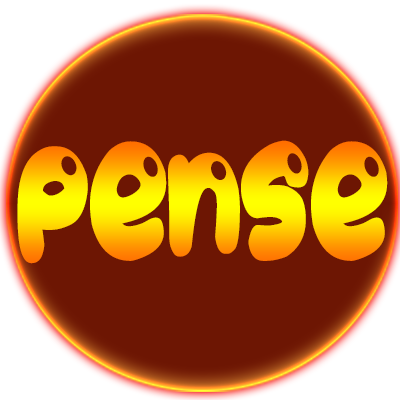
<style>
.page{position:relative;width:400px;height:400px;background:#6d1603}
.page>*{position:absolute;margin:0}
.t1{font:125.4px "JuicyFruity";scale:0.66 1}
</style>
<div class="page">
<p class="t1" style="left:17px;top:140px;width:371px;height:124px">pense</p>
</div>
